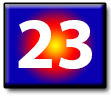
<style>
.page{position:relative;width:111px;height:96px;background:#ffffff}
.page>*{position:absolute;margin:0}
.t1{font:72px "MyriadPro-Bold";color:#ffffff}
</style>
<div class="page">
<p class="t1" style="left:18px;top:20px;width:74px;height:49px">23</p>
</div>
